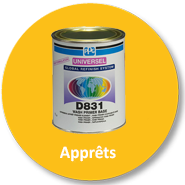
<style>
.page{position:relative;width:185px;height:185px;background:#fcbf18}
.page>*{position:absolute;margin:0}
.t1{font:17.8px "Calibri-Bold";color:#ffffff}
</style>
<div class="page">
<p class="t1" style="left:60px;top:145px;width:56px;height:17px">Apprêts</p>
</div>
